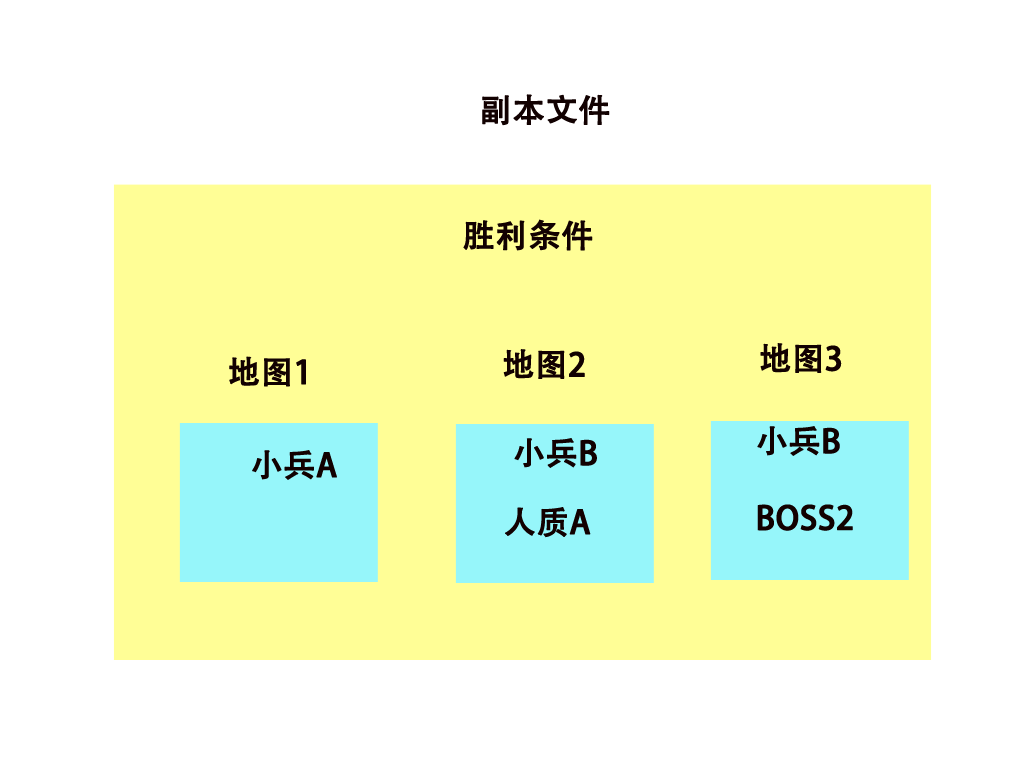
<style>
.page{position:relative;width:1024px;height:768px;background:#ffffff}
.page>*{position:absolute;margin:0}
.t1{font:32px "AdobeHeitiStd-Regular";color:#120101;font-weight:bold}
</style>
<div class="page">
<p class="t1" style="left:482px;top:94px;width:128px;height:32px">副本文件</p>
<p class="t1" style="left:463px;top:219px;width:130px;height:32px">胜利条件</p>
<p class="t1" style="left:503px;top:349px;width:82px;height:30px">地图2</p>
<p class="t1" style="left:760px;top:343px;width:82px;height:30px">地图3</p>
<p class="t1" style="left:229px;top:356px;width:77px;height:31px">地图1</p>
<p class="t1" style="left:514px;top:438px;width:83px;height:30px">小兵B</p>
<p class="t1" style="left:757px;top:426px;width:96px;height:105px">小兵B<br><br>BOSS2</p>
<p class="t1" style="left:252px;top:450px;width:85px;height:30px">小兵A</p>
<p class="t1" style="left:505px;top:507px;width:86px;height:31px">人质A</p>
</div>
